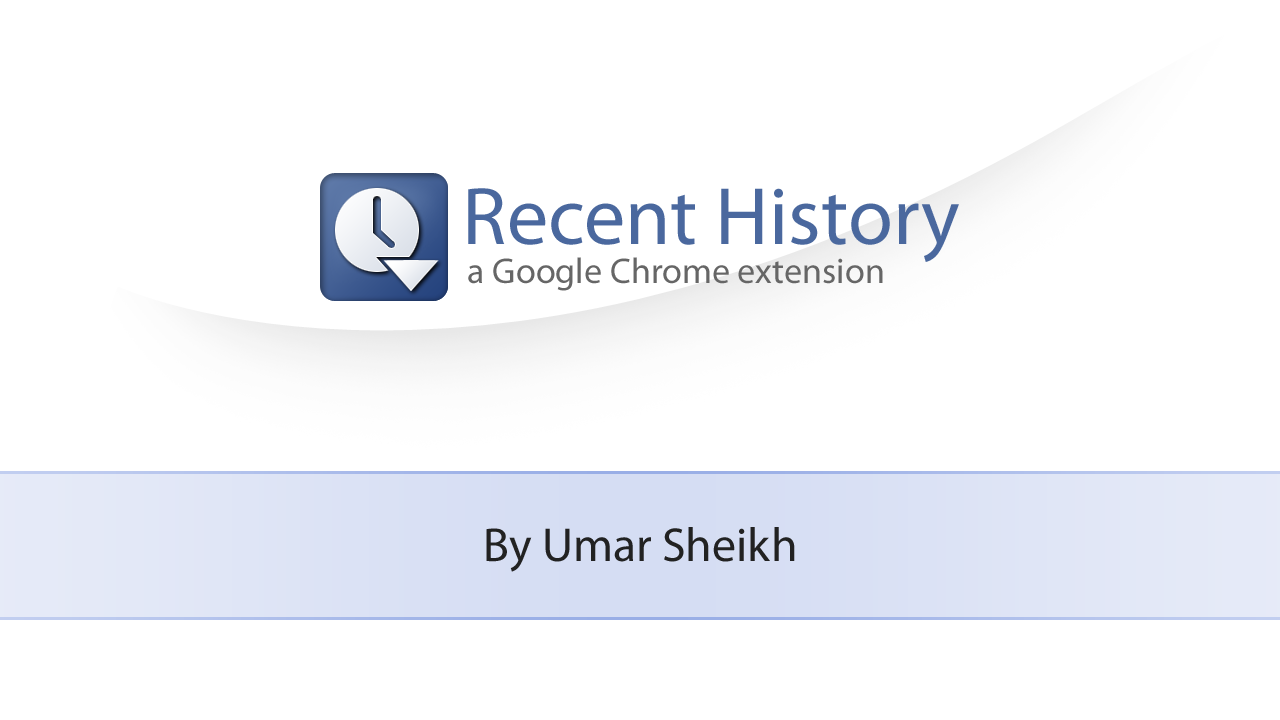
<style>
.page{position:relative;width:1280px;height:720px;background:#ffffff}
.page>*{position:absolute;margin:0}
.t1{font:82px "MyriadPro-Regular";color:#4a689e}
.t2{font:36px "MyriadPro-Regular";color:#666666}
.t3{font:48px "MyriadPro-Regular";color:#222222}
</style>
<div class="page">
<p class="t1" style="left:468px;top:188px;width:491px;height:74px">Recent History</p>
<p class="t2" style="left:468px;top:257px;width:415px;height:34px">a Google Chrome extension</p>
<p class="t3" style="left:486px;top:527px;width:309px;height:45px">By Umar Sheikh</p>
</div>
